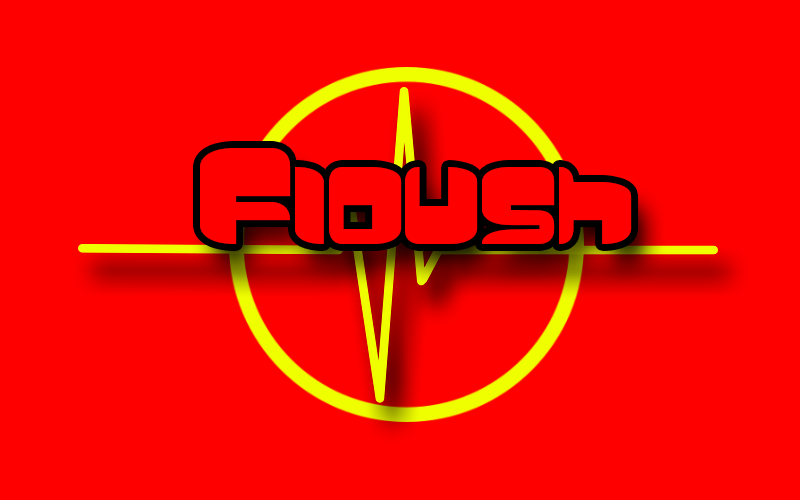
<style>
.page{position:relative;width:800px;height:500px;background:#ff0000}
.page>*{position:absolute;margin:0}
.t1{font:120px "Comicker";color:#ff0000}
</style>
<div class="page">
<p class="t1" style="left:200px;top:148px;width:432px;height:96px">Floush</p>
</div>
